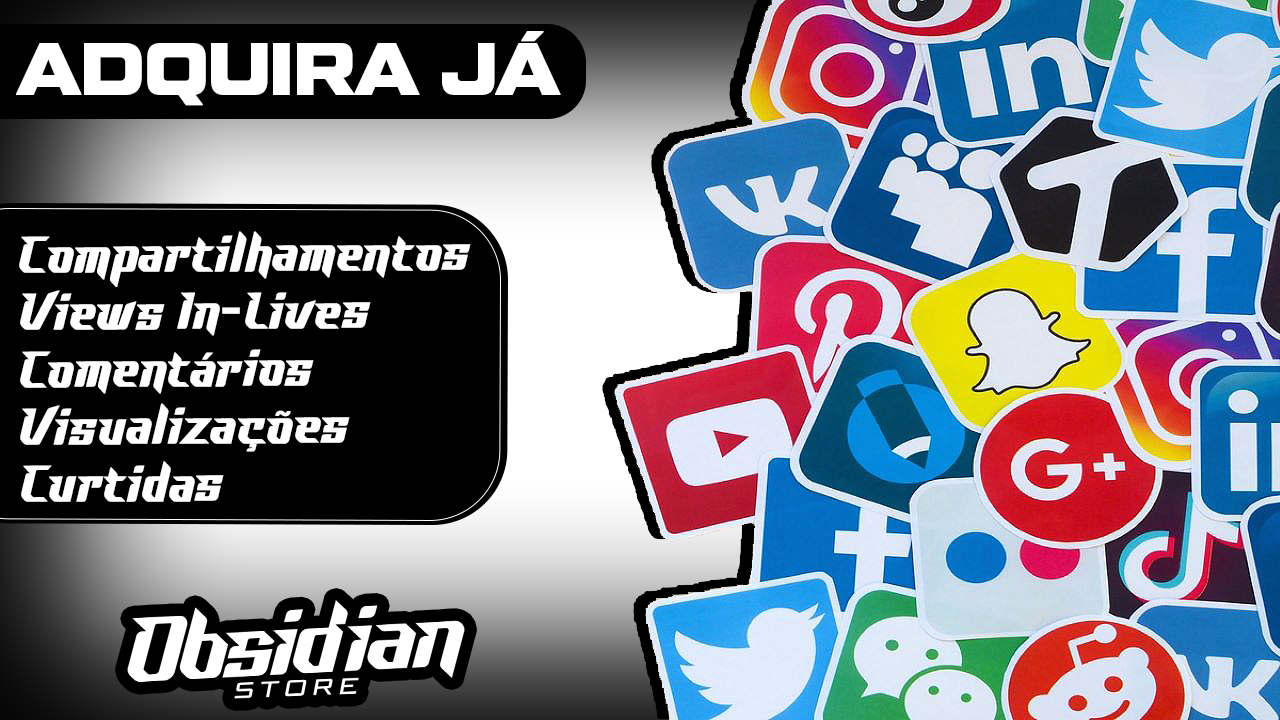
<style>
.page{position:relative;width:1280px;height:720px;background:#000000}
.page>*{position:absolute;margin:0}
.t1{font:72.6px "TacticSansExd-Blk";color:#ffffff;font-weight:bold;scale:0.91 1}
.t2{font:52.6px "FinoDemoVersion";color:#ffffff;font-weight:bold;scale:0.91 1}
</style>
<div class="page">
<p class="t1" style="left:16px;top:31px;width:545px;height:75px">ADQUIRA JÁ</p>
<p class="t2" style="left:19px;top:231px;width:452px;height:271px">Compartilhamentos<br>Views In-Lives<br>Comentários<br>Visualizações<br>Curtidas</p>
</div>
